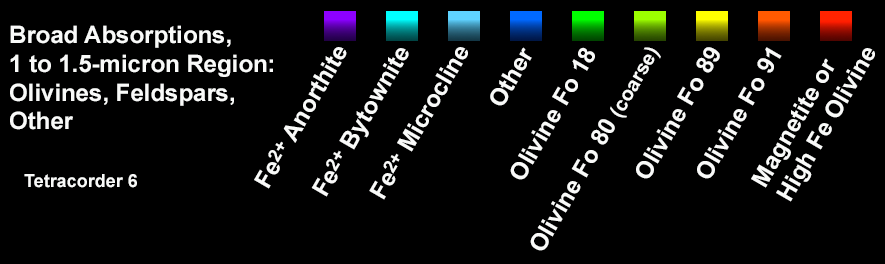
<style>
.page{position:relative;width:885px;height:264px;background:#000000}
.page>*{position:absolute;margin:0}
.t1{font:24px "Arial-BoldMT";color:#f9faf9}
.t2{font:18px "Arial-BoldMT";color:#f9faf9}
.t3{font:20px "Arial-BoldMT";color:#f9faf9}
</style>
<div class="page">
<p class="t1" style="left:10px;top:25px;width:263px;height:163px">Broad Absorptions,<br>1 to 1.5-micron Region:<br>Olivines, Feldspars,<br>Other<br><br><br><br><span class="t2">   Tetracorder 6</span></p>
<p class="t1" style="left:254px;top:47px;width:93px;height:142px;rotate:-60deg">Fe<span class="t2">2+</span> Anorthite</p>
<p class="t1" style="left:311px;top:48px;width:98px;height:149px;rotate:-60deg">Fe<span class="t2">2+</span> Bytownite</p>
<p class="t1" style="left:369px;top:47px;width:99px;height:153px;rotate:-60deg">Fe<span class="t2">2+</span> Microcline</p>
<p class="t1" style="left:490px;top:47px;width:42px;height:59px;rotate:-60deg">Other</p>
<p class="t1" style="left:510px;top:47px;width:85px;height:133px;rotate:-60deg">Olivine Fo 18</p>
<p class="t1" style="left:530px;top:47px;width:131px;height:204px;rotate:-60deg">Olivine Fo 80 <span class="t3">(coarse)</span></p>
<p class="t1" style="left:636px;top:47px;width:84px;height:132px;rotate:-60deg">Olivine Fo 89</p>
<p class="t1" style="left:697px;top:47px;width:85px;height:132px;rotate:-60deg">Olivine Fo 91</p>
<p class="t1" style="left:751px;top:48px;width:124px;height:154px;rotate:-60deg">Magnetite or<br>High Fe Olivine</p>
</div>
